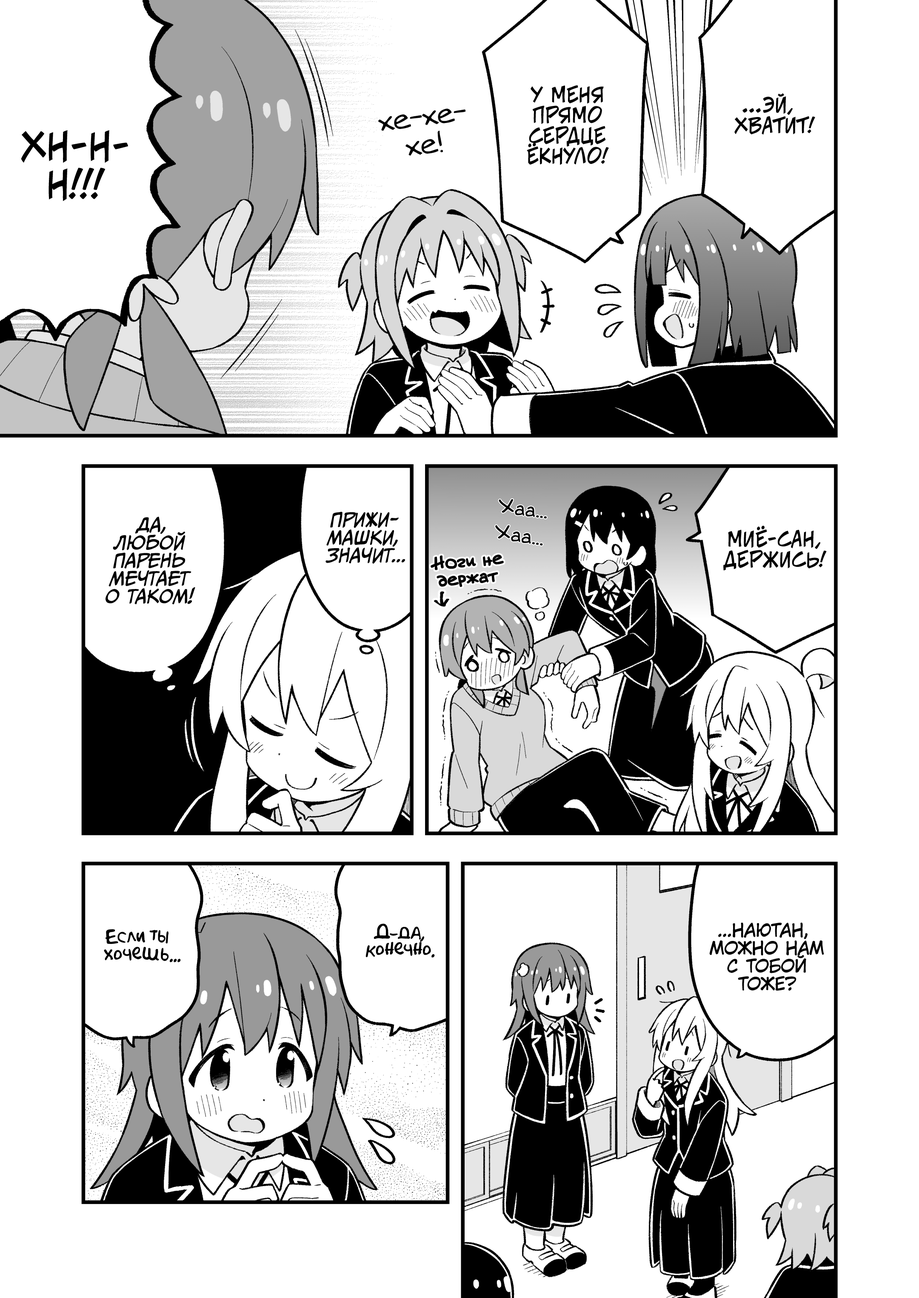
<style>
.page{position:relative;width:919px;height:1298px;background:#ffffff}
.page>*{position:absolute;margin:0}
.t1{font:20.4px "v_CCJeffCampbell";color:#000000;text-transform:uppercase}
.t2{font:28.1px "v_Augie";color:#000000}
.t3{font:38.3px "v_CCJeffCampbell";color:#000000;text-transform:uppercase}
.t4{font:19.1px "v_Augie";color:#000000;font-weight:bold}
.t5{font:17.9px "CCMeanwhile";color:#000000;text-transform:uppercase;font-style:italic}
.t6{font:17px "v_Augie";color:#000000;font-weight:bold}
.t7{font:17.9px "AkbarPlain";color:#000000}
.t8{font:17.9px "KuraiVoice2";color:#000000;text-transform:uppercase}
</style>
<div class="page">
<p class="t1" style="left:527px;top:85px;width:82px;height:80px;text-align:center">У меня<br>прямо<br>сердце<br>ёкнуло!</p>
<p class="t1" style="left:734px;top:93px;width:81px;height:41px;text-align:center">...Эй,<br>хватит!</p>
<p class="t2" style="left:378px;top:108px;width:88px;height:48px;text-align:center;rotate:-7deg">хе-хе-<br>хе!</p>
<p class="t3" style="left:21px;top:130px;width:107px;height:71px;text-align:center">Хн-н-<br>н!!!</p>
<p class="t4" style="left:499px;top:499px;width:48px;height:20px;rotate:7deg">Хаа...</p>
<p class="t5" style="left:106px;top:516px;width:89px;height:88px;text-align:center">Да,<br>любой<br>парень<br>мечтает<br>о таком!</p>
<p class="t5" style="left:325px;top:511px;width:80px;height:53px;text-align:center">Прижи-<br>машки,<br>значит...</p>
<p class="t4" style="left:495px;top:525px;width:48px;height:20px;rotate:9deg">Хаа...</p>
<p class="t1" style="left:723px;top:525px;width:104px;height:46px;text-align:center">Миё-сан,<br>держись!</p>
<p class="t6" style="left:431px;top:555px;width:72px;height:32px;text-align:center;rotate:-5deg">Ноги не<br>держат</p>
<p class="t7" style="left:104px;top:929px;width:77px;height:33px;text-align:center">Если ты<br>хочешь...</p>
<p class="t7" style="left:365px;top:923px;width:70px;height:34px;text-align:center">Д-да,<br>конечно.</p>
<p class="t8" style="left:709px;top:922px;width:115px;height:68px;text-align:center">...Наютан,<br>можно нам<br>с тобой<br>тоже?</p>
</div>
